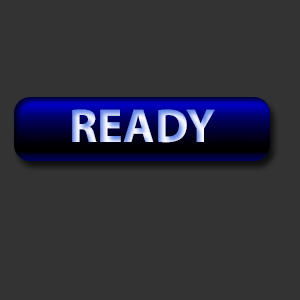
<style>
.page{position:relative;width:300px;height:300px;background:#333333}
.page>*{position:absolute;margin:0}
.t1{font:48px "MyriadPro-Bold"}
</style>
<div class="page">
<p class="t1" style="left:72px;top:109px;width:143px;height:34px">READY</p>
</div>
